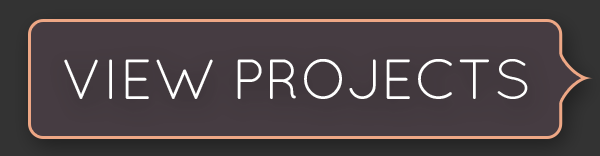
<style>
.page{position:relative;width:600px;height:156px;background:#463c42}
.page>*{position:absolute;margin:0}
.t1{font:56.4px "Quicksand-Regular";color:#fffefe}
</style>
<div class="page">
<p class="t1" style="left:64px;top:59px;width:464px;height:40px">VIEW PROJECTS</p>
</div>
